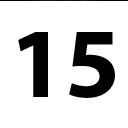
<style>
.page{position:relative;width:128px;height:128px;background:#ffffff}
.page>*{position:absolute;margin:0}
.t1{font:99.7px "MyriadHebrew-Bold";color:#000000}
</style>
<div class="page">
<p class="t1" style="left:18px;top:31px;width:97px;height:66px">15</p>
</div>
